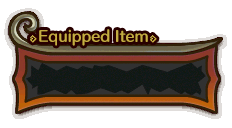
<style>
.page{position:relative;width:232px;height:128px;background:#ffffff}
.page>*{position:absolute;margin:0}
.t1{font:14px "HummingStd-B";color:#c5ad42}
</style>
<div class="page">
<p class="t1" style="left:39px;top:29px;width:109px;height:17px">Equipped Item</p>
</div>
